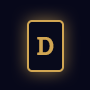
<style>
.page{position:relative;width:90px;height:90px;background:#07081a}
.page>*{position:absolute;margin:0}
.t1{font:25.4px "RobotoSlab-Bold";color:#d1a653}
</style>
<div class="page">
<p class="t1" style="left:37px;top:37px;width:17px;height:18px">D</p>
</div>
